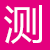
<style>
.page{position:relative;width:50px;height:50px;background:#e4007e}
.page>*{position:absolute;margin:0}
.t1{font:42px "FZLTHK--GBK1-0";color:#ffffff}
</style>
<div class="page">
<p class="t1" style="left:4px;top:5px;width:38px;height:39px">测</p>
</div>
